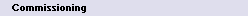
<style>
.page{position:relative;width:248px;height:16px;background:#dfdeed}
.page>*{position:absolute;margin:0}
.t1{font:9px "Tahoma";color:#000000;font-weight:bold}
</style>
<div class="page">
<p class="t1" style="left:12px;top:4px;width:74px;height:9px">Commissioning</p>
</div>
